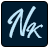
<style>
.page{position:relative;width:48px;height:48px;background:#001c30}
.page>*{position:absolute;margin:0}
.t1{font:36.9px "Ruang";color:#bee7fb;scale:0.81 1}
.t2{font:19.7px "Ruang";color:#bee7fb}
</style>
<div class="page">
<p class="t1" style="left:7px;top:6px;width:29px;height:32px">N</p>
<p class="t2" style="left:26px;top:22px;width:17px;height:16px">K</p>
</div>
